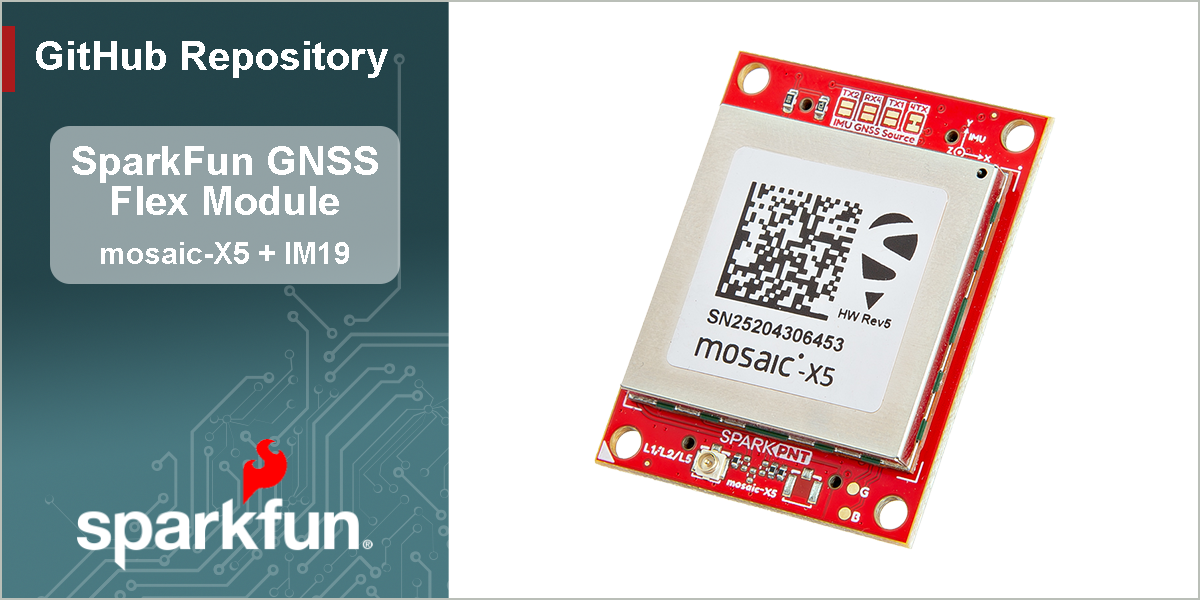
<style>
.page{position:relative;width:1200px;height:600px;background:#ffffff}
.page>*{position:absolute;margin:0}
.t1{font:40px "Arial-BoldMT";color:#ffffff}
.t2{font:30px "Arial-BoldMT";color:#ffffff}
</style>
<div class="page">
<p class="t1" style="left:36px;top:41px;width:352px;height:37px">GitHub Repository</p>
<p class="t1" style="left:72px;top:146px;width:306px;height:69px;text-align:center">SparkFun GNSS<br>Flex Module</p>
<p class="t2" style="left:101px;top:242px;width:248px;height:22px">mosaic-X5 + IM19</p>
</div>
